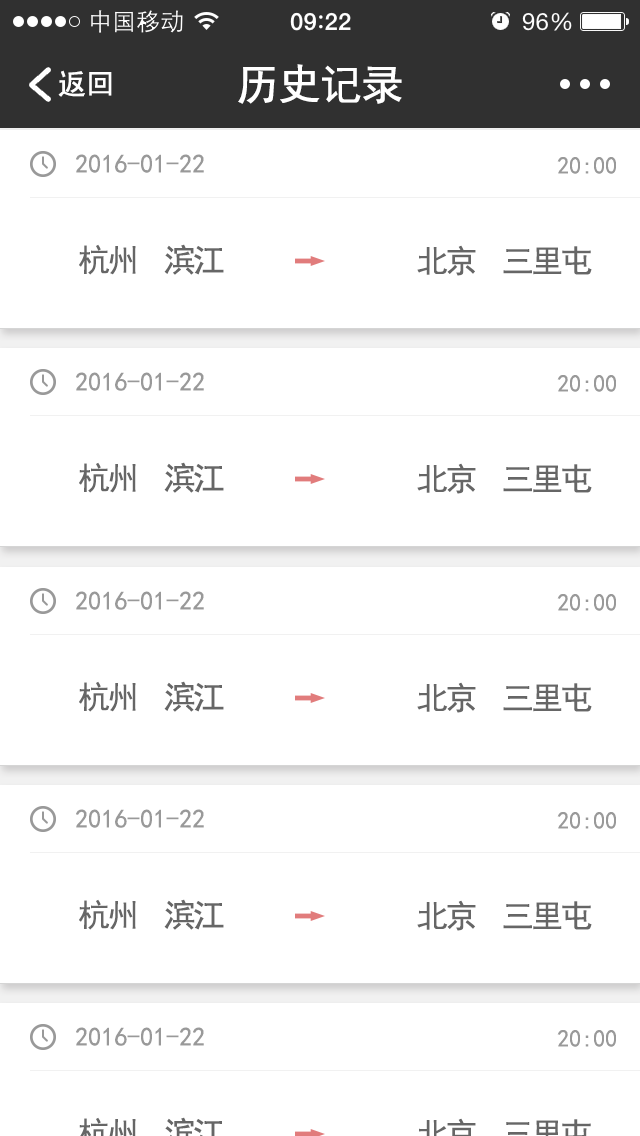
<style>
.page{position:relative;width:640px;height:1136px;background:#ffffff}
.page>*{position:absolute;margin:0}
.t1{font:42px "SimHei";letter-spacing:-0.04em;color:#ffffff;font-weight:bold}
.t2{font:28px "SimHei";color:#ffffff;font-weight:bold}
.t3{font:26px "SimHei";color:#999999}
.t4{font:24px "SimHei";color:#999999}
.t5{font:32px "SimHei";letter-spacing:-0.08em;color:#666666}
</style>
<div class="page">
<p class="t1" style="left:238px;top:64px;width:164px;height:40px">历史记录</p>
<p class="t2" style="left:58px;top:70px;width:54px;height:27px">返回</p>
<p class="t3" style="left:76px;top:154px;width:128px;height:19px">2016-01-22</p>
<p class="t4" style="left:557px;top:157px;width:59px;height:17px">20:00</p>
<p class="t5" style="left:79px;top:244px;width:145px;height:31px">杭州  滨江</p>
<p class="t5" style="left:417px;top:245px;width:175px;height:31px">北京  三里屯</p>
<p class="t3" style="left:76px;top:372px;width:128px;height:19px">2016-01-22</p>
<p class="t4" style="left:557px;top:375px;width:59px;height:17px">20:00</p>
<p class="t5" style="left:79px;top:462px;width:145px;height:31px">杭州  滨江</p>
<p class="t5" style="left:417px;top:463px;width:175px;height:31px">北京  三里屯</p>
<p class="t3" style="left:76px;top:591px;width:128px;height:19px">2016-01-22</p>
<p class="t4" style="left:557px;top:594px;width:59px;height:17px">20:00</p>
<p class="t5" style="left:79px;top:681px;width:145px;height:31px">杭州  滨江</p>
<p class="t5" style="left:417px;top:682px;width:175px;height:31px">北京  三里屯</p>
<p class="t3" style="left:76px;top:809px;width:128px;height:19px">2016-01-22</p>
<p class="t4" style="left:557px;top:812px;width:59px;height:17px">20:00</p>
<p class="t5" style="left:79px;top:899px;width:145px;height:31px">杭州  滨江</p>
<p class="t5" style="left:417px;top:900px;width:175px;height:31px">北京  三里屯</p>
<p class="t3" style="left:76px;top:1027px;width:128px;height:19px">2016-01-22</p>
<p class="t4" style="left:557px;top:1030px;width:59px;height:17px">20:00</p>
</div>
